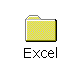
<style>
.page{position:relative;width:80px;height:80px;background:#ffffff}
.page>*{position:absolute;margin:0}
.t1{font:14px "MSReferenceSansSerif";color:#000000}
</style>
<div class="page">
<p class="t1" style="left:24px;top:47px;width:33px;height:11px">Excel</p>
</div>
